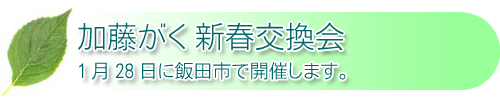
<style>
.page{position:relative;width:500px;height:100px;background:#ffffff}
.page>*{position:absolute;margin:0}
.t1{font:30px "NfMotoyaCedar-W1-90mskp-RKSJ-H";color:#006666}
.t2{font:19px "NfMotoyaCedar-W1-90mskp-RKSJ-H";color:#006666}
</style>
<div class="page">
<p class="t1" style="left:78px;top:22px;width:266px;height:29px">加藤がく 新春交換会</p>
<p class="t2" style="left:79px;top:62px;width:267px;height:18px">1月28日に飯田市で開催します。</p>
</div>
